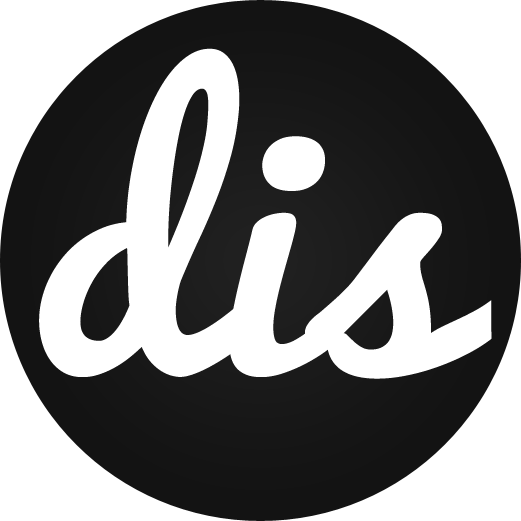
<style>
.page{position:relative;width:521px;height:521px;background:#ffffff}
.page>*{position:absolute;margin:0}
.t1{font:350px "Pacifico-Regular";color:#ffffff}
</style>
<div class="page">
<p class="t1" style="left:39px;top:48px;width:453px;height:331px">dis</p>
</div>
